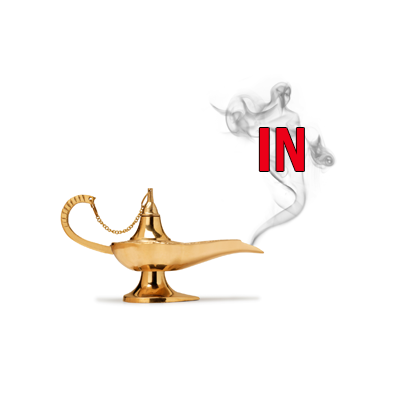
<style>
.page{position:relative;width:400px;height:400px;background:#ffffff}
.page>*{position:absolute;margin:0}
.t1{font:64px "FranklinGothic-DemiCond";color:#ec0018;scale:0.95 1}
</style>
<div class="page">
<p class="t1" style="left:259px;top:128px;width:45px;height:43px">IN</p>
</div>
